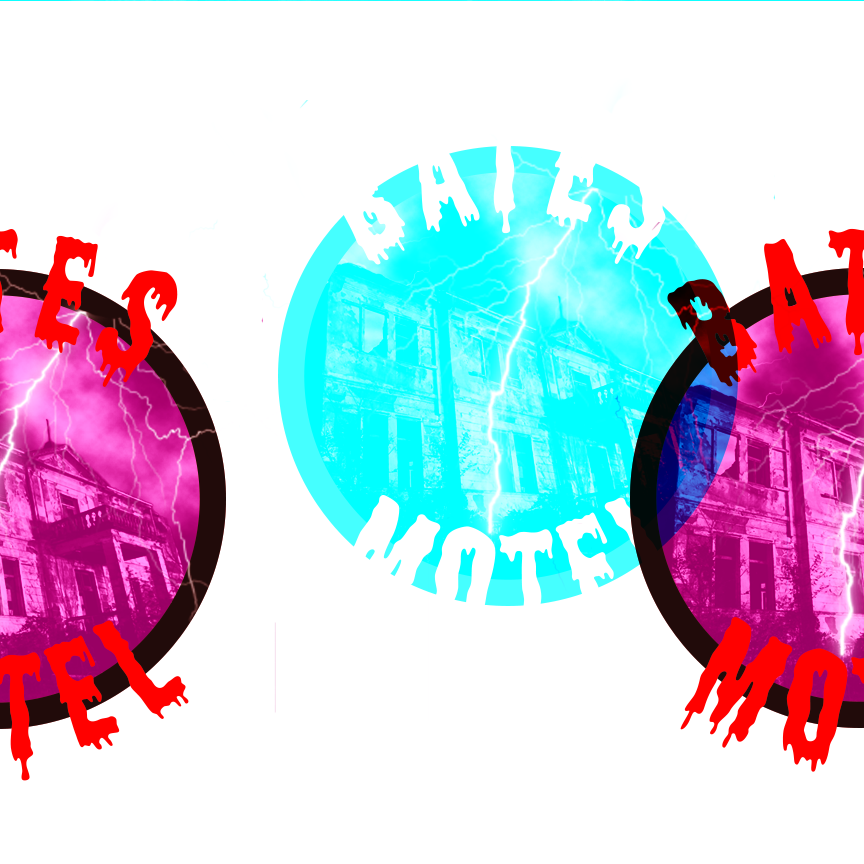
<style>
.page{position:relative;width:864px;height:864px;background:#ffffff}
.page>*{position:absolute;margin:0}
.t1{font:150px "Shlop-Regular";letter-spacing:0.075em;color:#ffffff}
.t2{font:150px "Shlop-Regular";letter-spacing:0.19em;color:#ffffff}
</style>
<div class="page">
<p class="t1" style="left:315px;top:105px;width:375px;height:159px;rotate:32deg">BATES</p>
<p class="t2" style="left:328px;top:494px;width:373px;height:163px;rotate:19deg">MOTEL</p>
</div>
